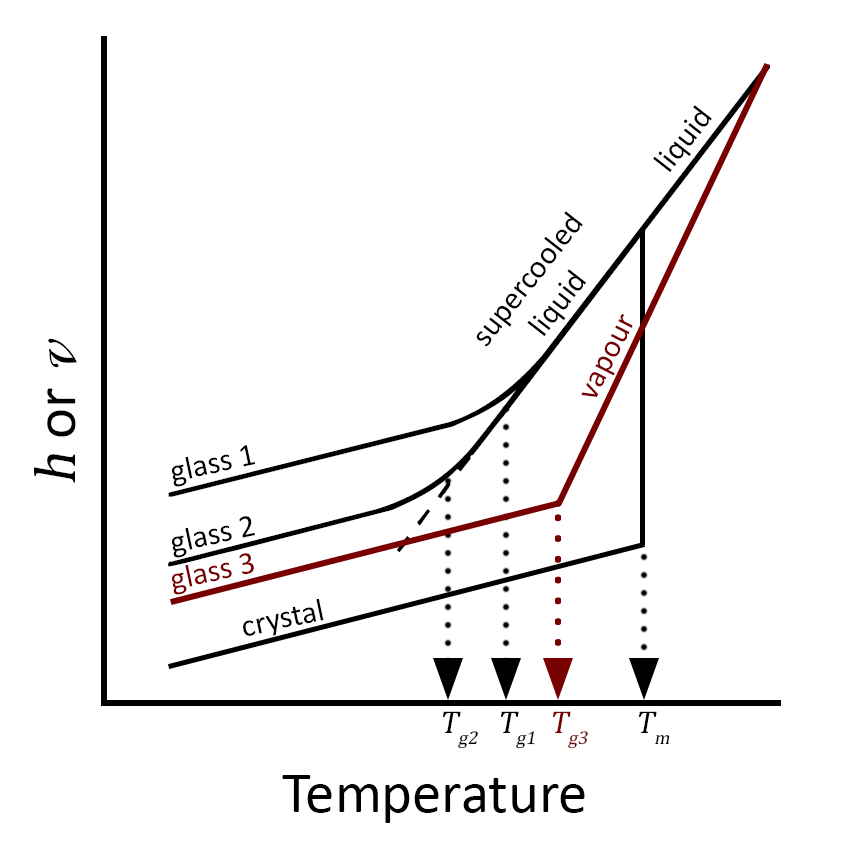
<style>
.page{position:relative;width:852px;height:850px;background:#ffffff}
.page>*{position:absolute;margin:0}
.t1{font:32px "Calibri";color:#000000}
.t2{font:32px "Calibri";color:#790000}
.t3{font:58.7px "Calibri";color:#000000}
.t4{font:58.7px "CambriaMath";color:#000000;font-style:italic}
.t5{font:64px "MonotypeCorsiva";color:#000000;font-style:italic}
.t6{font:32px "CambriaMath";color:#000000;font-style:italic}
.t7{font:32px "CambriaMath";color:#790000;font-style:italic}
</style>
<div class="page">
<p class="t1" style="left:653px;top:105px;width:59px;height:67px;rotate:-52deg">liquid</p>
<p class="t1" style="left:476px;top:211px;width:110px;height:136px;text-align:center;rotate:-52deg">supercooled<br>liquid</p>
<p class="t2" style="left:581px;top:314px;width:52px;height:83px;rotate:-63deg">vapour</p>
<p class="t3" style="left:34px;top:338px;width:43px;height:145px;rotate:-90deg"><span class="t4">h </span>or <span class="t5">v</span></p>
<p class="t1" style="left:172px;top:445px;width:83px;height:42px;rotate:-12deg">glass 1</p>
<p class="t1" style="left:172px;top:516px;width:83px;height:42px;rotate:-12deg">glass 2</p>
<p class="t2" style="left:172px;top:553px;width:82px;height:42px;rotate:-12deg">glass 3</p>
<p class="t1" style="left:243px;top:598px;width:81px;height:38px;rotate:-12deg">crystal</p>
<p class="t6" style="left:442px;top:711px;width:36px;height:38px">Tg2</p>
<p class="t6" style="left:500px;top:711px;width:35px;height:38px">Tg1</p>
<p class="t7" style="left:552px;top:711px;width:36px;height:38px">Tg3</p>
<p class="t6" style="left:638px;top:711px;width:32px;height:34px">Tm</p>
<p class="t3" style="left:282px;top:775px;width:303px;height:48px">Temperature</p>
</div>
